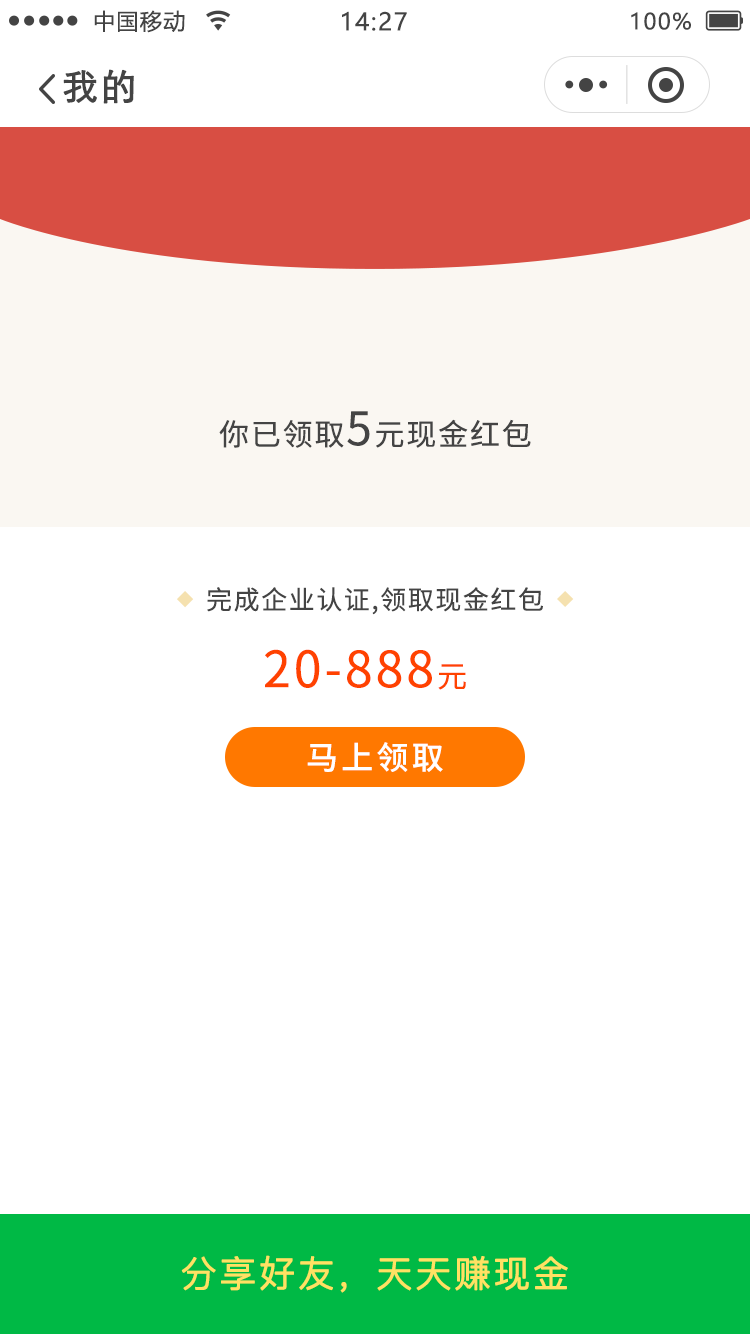
<style>
.page{position:relative;width:750px;height:1334px;background:#ffffff}
.page>*{position:absolute;margin:0}
.t1{font:22px "MicrosoftYaHei";letter-spacing:0.06em;color:#444444}
.t2{font:24px "MicrosoftYaHei";letter-spacing:0.06em;color:#444444}
.t3{font:36px "STXihei";letter-spacing:0.06em;color:#444444;font-weight:bold}
.t4{font:30px "NotoSansCJKsc-Regular";letter-spacing:0.06em;color:#444444}
.t5{font:46px "NotoSansCJKsc-Regular";letter-spacing:0.06em;color:#444444}
.t6{font:26px "NotoSansCJKsc-Regular";letter-spacing:0.06em;color:#444444}
.t7{font:50px "NotoSansCJKsc-Regular";letter-spacing:0.06em;color:#ff4200}
.t8{font:30px "NotoSansCJKsc-Regular";letter-spacing:0.06em;color:#ff4200}
.t9{font:32px "NotoSansCJKsc-Medium";letter-spacing:0.1em;color:#ffffff}
.t10{font:36px "PingFang-SC-Regular";letter-spacing:0.06em;color:#ffe163;font-weight:bold}
</style>
<div class="page">
<p class="t1" style="left:94px;top:10px;width:91px;height:23px">中国移动</p>
<p class="t2" style="left:342px;top:11px;width:65px;height:20px">14:27</p>
<p class="t1" style="left:631px;top:12px;width:60px;height:18px">100%</p>
<p class="t3" style="left:63px;top:69px;width:71px;height:35px">我的</p>
<p class="t4" style="left:219px;top:411px;width:312px;height:37px">你已领取<span class="t5">5</span>元现金红包</p>
<p class="t6" style="left:207px;top:587px;width:336px;height:28px">完成企业认证,领取现金红包</p>
<p class="t7" style="left:265px;top:649px;width:201px;height:41px">20-888<span class="t8">元</span></p>
<p class="t9" style="left:307px;top:742px;width:136px;height:30px">马上领取</p>
<p class="t10" style="left:181px;top:1255px;width:387px;height:38px">分享好友，天天赚现金</p>
</div>
